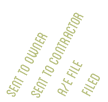
<style>
.page{position:relative;width:108px;height:102px;background:#ffffff}
.page>*{position:absolute;margin:0}
.t1{font:20px/22px "Blanch-Caps";color:#b9c181}
.t2{font:22px/22px "Blanch-Caps";color:#97a150}
</style>
<div class="page">
<p class="t1" style="left:6px;top:12px;width:94px;height:86px;rotate:-62deg"><span class="t2">    </span>sent to owner<br>        sent to contractor<br>             a/e file<br>                 filed</p>
</div>
